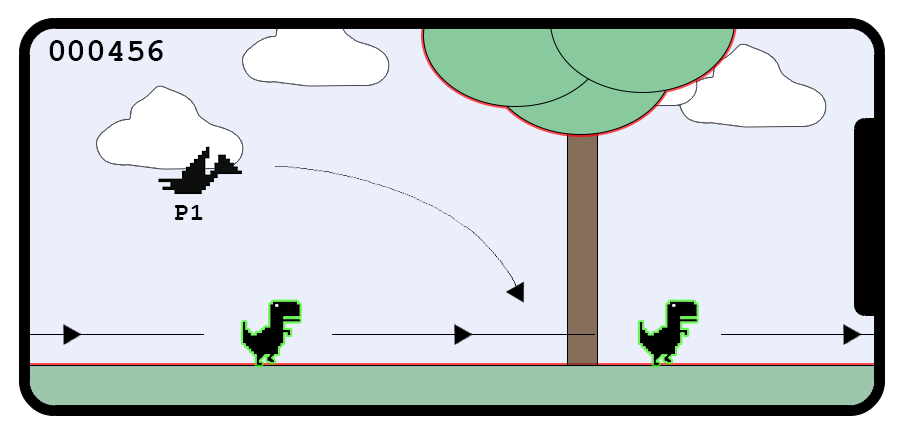
<style>
.page{position:relative;width:899px;height:447px;background:#ebeffc}
.page>*{position:absolute;margin:0}
.t1{font:33px "FreeMonoBold";color:#000000}
.t2{font:25px "FreeMonoBold";color:#000000}
</style>
<div class="page">
<p class="t1" style="left:49px;top:40px;width:114px;height:21px">000456</p>
<p class="t2" style="left:174px;top:205px;width:29px;height:15px">P1</p>
</div>
